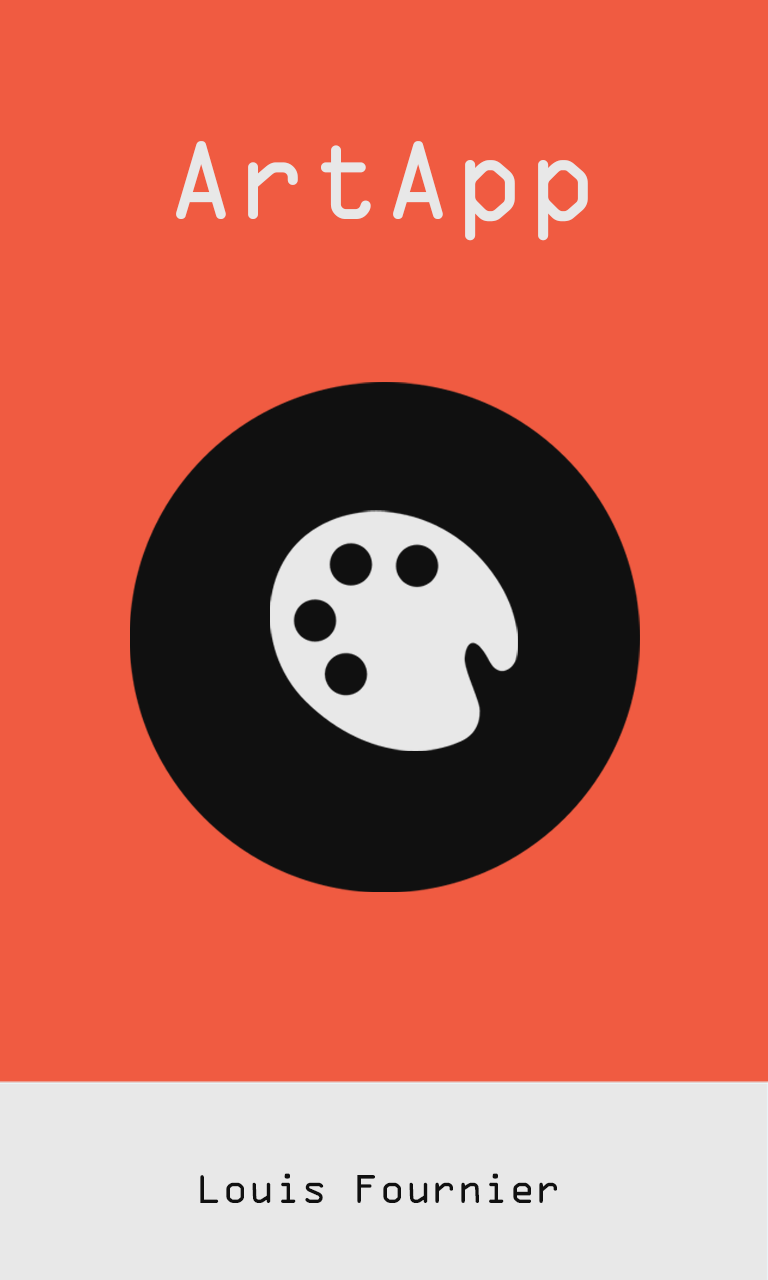
<style>
.page{position:relative;width:768px;height:1280px;background:#f05b41}
.page>*{position:absolute;margin:0}
.t1{font:119.8px "OCRAExtended";color:#e8e8e8}
.t2{font:43.1px "OCRAExtended";color:#101010}
</style>
<div class="page">
<p class="t1" style="left:176px;top:141px;width:412px;height:100px">ArtApp</p>
<p class="t2" style="left:200px;top:1173px;width:357px;height:30px">Louis Fournier</p>
</div>
